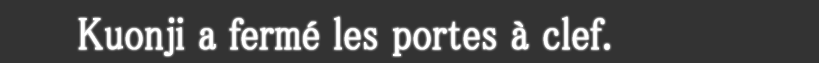
<style>
.page{position:relative;width:819px;height:63px;background:#333333}
.page>*{position:absolute;margin:0}
.t1{font:45.6px "MS-PMincho";color:#ffffff;font-weight:bold;scale:0.84 1}
</style>
<div class="page">
<p class="t1" style="left:78px;top:16px;width:532px;height:40px">Kuonji a fermé les portes à clef.</p>
</div>
